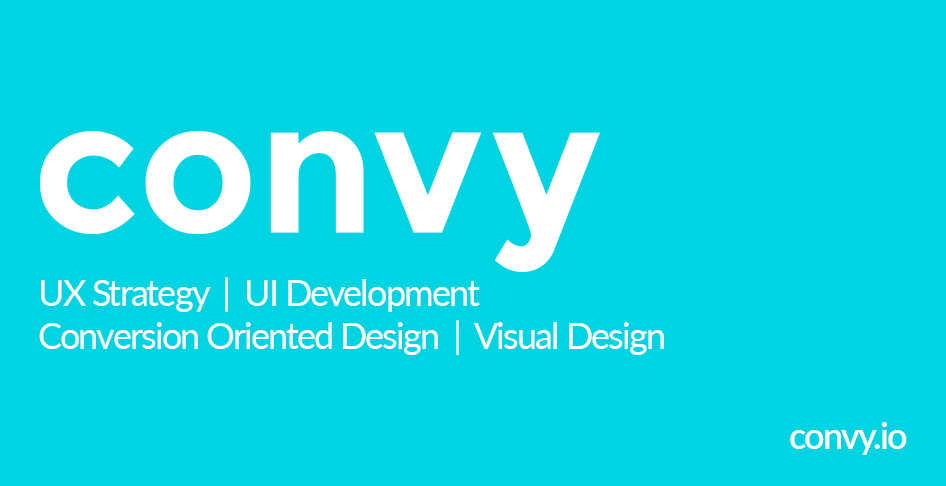
<style>
.page{position:relative;width:946px;height:486px;background:#00d3e1}
.page>*{position:absolute;margin:0}
.t1{font:36px "Lato-Regular";letter-spacing:-0.05em;color:#ffffff}
.t2{font:36px "Lato-Semibold";letter-spacing:-0.05em;color:#ffffff}
</style>
<div class="page">
<p class="t1" style="left:39px;top:277px;width:625px;height:78px">UX Strategy  |  UI Development   <br>Conversion Oriented Design  |  Visual Design</p>
<p class="t2" style="left:790px;top:422px;width:117px;height:33px">convy.io</p>
</div>
